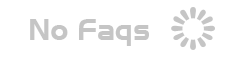
<style>
.page{position:relative;width:228px;height:57px;background:#ffffff}
.page>*{position:absolute;margin:0}
.t1{font:30px "Slicker";color:#c5c5c5}
</style>
<div class="page">
<p class="t1" style="left:30px;top:19px;width:119px;height:27px">No Faqs</p>
</div>
